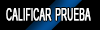
<style>
.page{position:relative;width:100px;height:30px;background:#000000}
.page>*{position:absolute;margin:0}
.t1{font:22.8px "ArialMT";color:#ffffff;font-variant:small-caps;font-weight:bold;scale:0.52 1}
</style>
<div class="page">
<p class="t1" style="left:6px;top:8px;width:85px;height:13px">calificar prueba</p>
</div>
